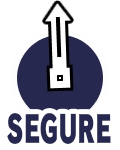
<style>
.page{position:relative;width:120px;height:150px;background:#ffffff}
.page>*{position:absolute;margin:0}
.t1{font:37.3px "RodinNTLGPro-UB";color:#272850;scale:0.62 1}
</style>
<div class="page">
<p class="t1" style="left:7px;top:113px;width:104px;height:31px">SEGURE</p>
</div>
